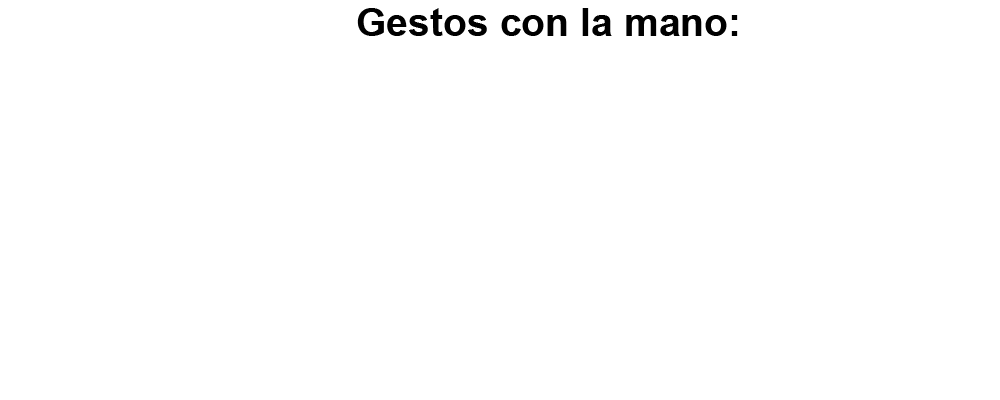
<style>
.page{position:relative;width:1000px;height:400px;background:#ffffff}
.page>*{position:absolute;margin:0}
.t1{font:38.8px "Arial-BoldMT";color:#000000}
</style>
<div class="page">
<p class="t1" style="left:357px;top:8px;width:381px;height:28px">Gestos con la mano:</p>
</div>
